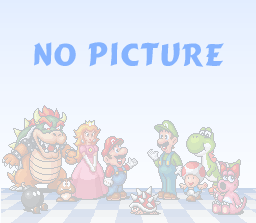
<style>
.page{position:relative;width:256px;height:223px}
.page>*{position:absolute;margin:0}
.t1{font:30px "Cartoon-Bold";color:#85b3ff}
</style>
<div class="page">
<p class="t1" style="left:34px;top:42px;width:190px;height:25px">No Picture</p>
</div>
